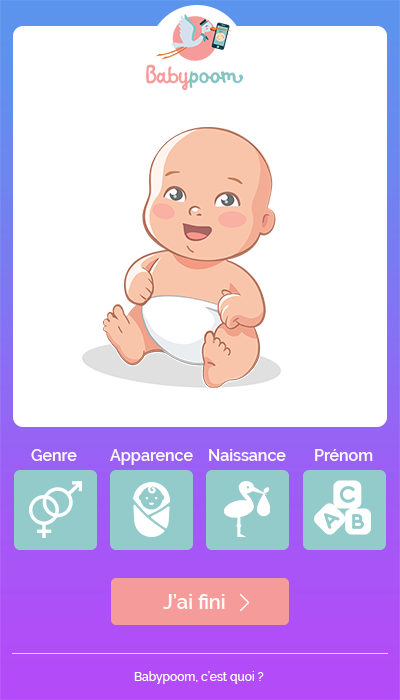
<style>
.page{position:relative;width:400px;height:700px;background:#ffffff}
.page>*{position:absolute;margin:0}
.t1{font:16px "Raleway-SemiBold";color:#fffafa}
.t2{font:20px "Raleway-SemiBold";color:#fffafa}
.t3{font:12px "Raleway-Medium";color:#ffffff}
</style>
<div class="page">
<p class="t1" style="left:31px;top:449px;width:46px;height:12px">Genre</p>
<p class="t1" style="left:110px;top:449px;width:83px;height:16px">Apparence</p>
<p class="t1" style="left:209px;top:449px;width:77px;height:12px">Naissance</p>
<p class="t1" style="left:315px;top:449px;width:58px;height:12px">Prénom</p>
<p class="t2" style="left:163px;top:594px;width:62px;height:15px">J’ai fini</p>
<p class="t3" style="left:134px;top:671px;width:130px;height:13px">Babypoom, c’est quoi ?</p>
</div>
